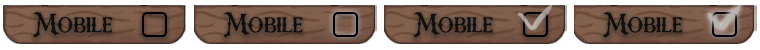
<style>
.page{position:relative;width:760px;height:50px;background:#ffffff}
.page>*{position:absolute;margin:0}
.t1{font:25.7px "RoseKnight-Regular";color:#0e0f0f}
</style>
<div class="page">
<p class="t1" style="left:33px;top:12px;width:79px;height:26px">Mobile</p>
<p class="t1" style="left:223px;top:12px;width:80px;height:26px">Mobile</p>
<p class="t1" style="left:413px;top:12px;width:80px;height:26px">Mobile</p>
<p class="t1" style="left:603px;top:12px;width:79px;height:26px">Mobile</p>
</div>
